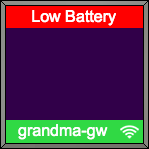
<style>
.page{position:relative;width:149px;height:149px;background:#310049}
.page>*{position:absolute;margin:0}
.t1{font:16px "ArialMT";color:#ffffff}
</style>
<div class="page">
<p class="t1" style="left:32px;top:10px;width:84px;height:16px">Low Battery</p>
<p class="t1" style="left:18px;top:124px;width:90px;height:16px">grandma-gw</p>
</div>
